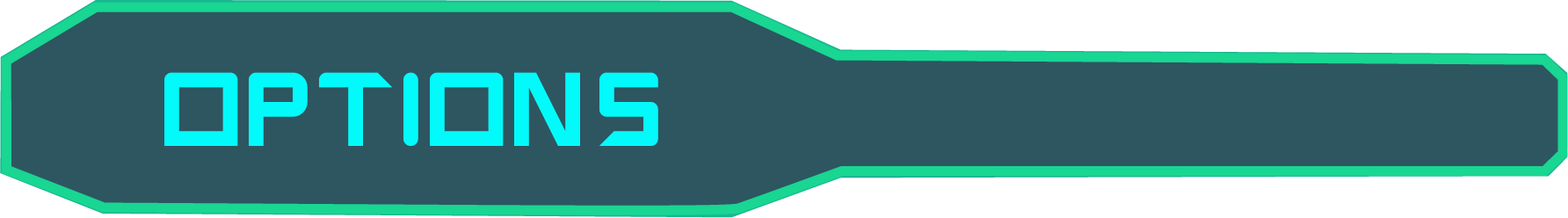
<style>
.page{position:relative;width:1568px;height:218px;background:#2d5661}
.page>*{position:absolute;margin:0}
.t1{font:73.2px "Astro";color:#03fafa}
</style>
<div class="page">
<p class="t1" style="left:164px;top:72px;width:494px;height:74px">options</p>
</div>
